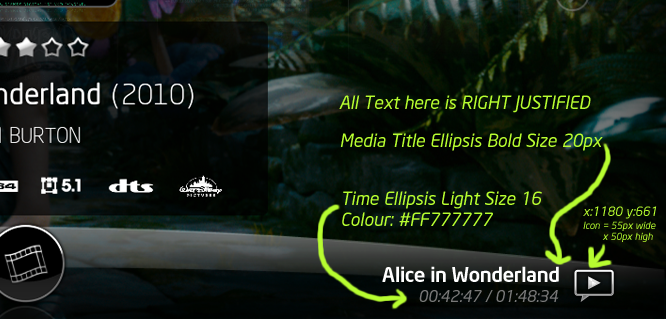
<style>
.page{position:relative;width:666px;height:319px}
.page>*{position:absolute;margin:0}
.t1{font:18px "NeoSansIntel-Italic";color:#b7fd30}
.t2{font:18px/21.6px "NeoSansIntel-Italic";color:#b7fd30}
.t3{font:12.9px "NeoSansIntel-Italic";color:#b7fd30}
.t4{font:9.8px/11.7px "NeoSansIntel-Italic";color:#b7fd30}
.t5{font:20px "NeoSansIntel-Medium";color:#ffffff}
.t6{font:16px "NeoSansIntel-Italic";color:#787878}
</style>
<div class="page">
<p class="t1" style="left:339px;top:95px;width:252px;height:18px">All Text here is RIGHT JUSTIFIED</p>
<p class="t1" style="left:340px;top:133px;width:263px;height:18px">Media Title Ellipsis Bold Size 20px</p>
<p class="t2" style="left:342px;top:191px;width:200px;height:35px">Time Ellipsis Light Size 16<br>Colour: #FF777777</p>
<p class="t3" style="left:583px;top:206px;width:74px;height:13px">x:1180 y:661</p>
<p class="t4" style="left:583px;top:221px;width:73px;height:21px;text-align:right">Icon = 55px wide<br>x 50px high</p>
<p class="t5" style="left:382px;top:266px;width:177px;height:16px">Alice in Wonderland</p>
<p class="t6" style="left:419px;top:290px;width:140px;height:12px">00:42:47 / 01:48:34</p>
</div>
